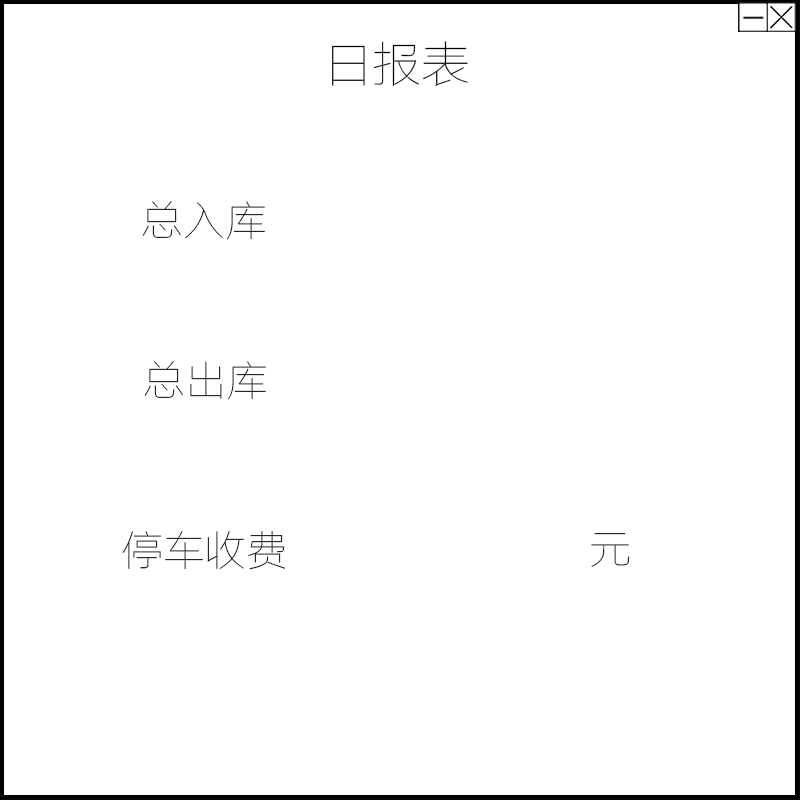
<style>
.page{position:relative;width:800px;height:800px;background:#ffffff}
.page>*{position:absolute;margin:0}
.t1{font:48.7px "FZLTCXHJW--GB1-0";color:#000000}
.t2{font:41.7px "FZLTCXHJW--GB1-0";color:#000000}
.t3{font:41.7px "FZLTCXHJW--GB1-0"}
</style>
<div class="page">
<p class="t1" style="left:332px;top:41px;width:136px;height:45px">日报表</p>
<p class="t2" style="left:142px;top:201px;width:123px;height:39px">总入库</p>
<p class="t2" style="left:144px;top:361px;width:122px;height:39px">总出库</p>
<p class="t2" style="left:122px;top:531px;width:163px;height:39px">停车收费</p>
<p class="t3" style="left:591px;top:533px;width:39px;height:34px">元</p>
</div>
